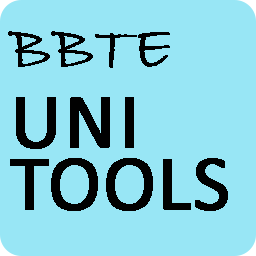
<style>
.page{position:relative;width:256px;height:256px;background:#98e6f5}
.page>*{position:absolute;margin:0}
.t1{font:61.9px "BradleyHandITC";color:#010101;font-weight:bold}
.t2{font:79px/62.3px "Calibri";color:#010101;font-weight:bold}
</style>
<div class="page">
<p class="t1" style="left:8px;top:31px;width:162px;height:37px">BBTE</p>
<p class="t2" style="left:10px;top:97px;width:218px;height:114px">UNI<br>TOOLS</p>
</div>
